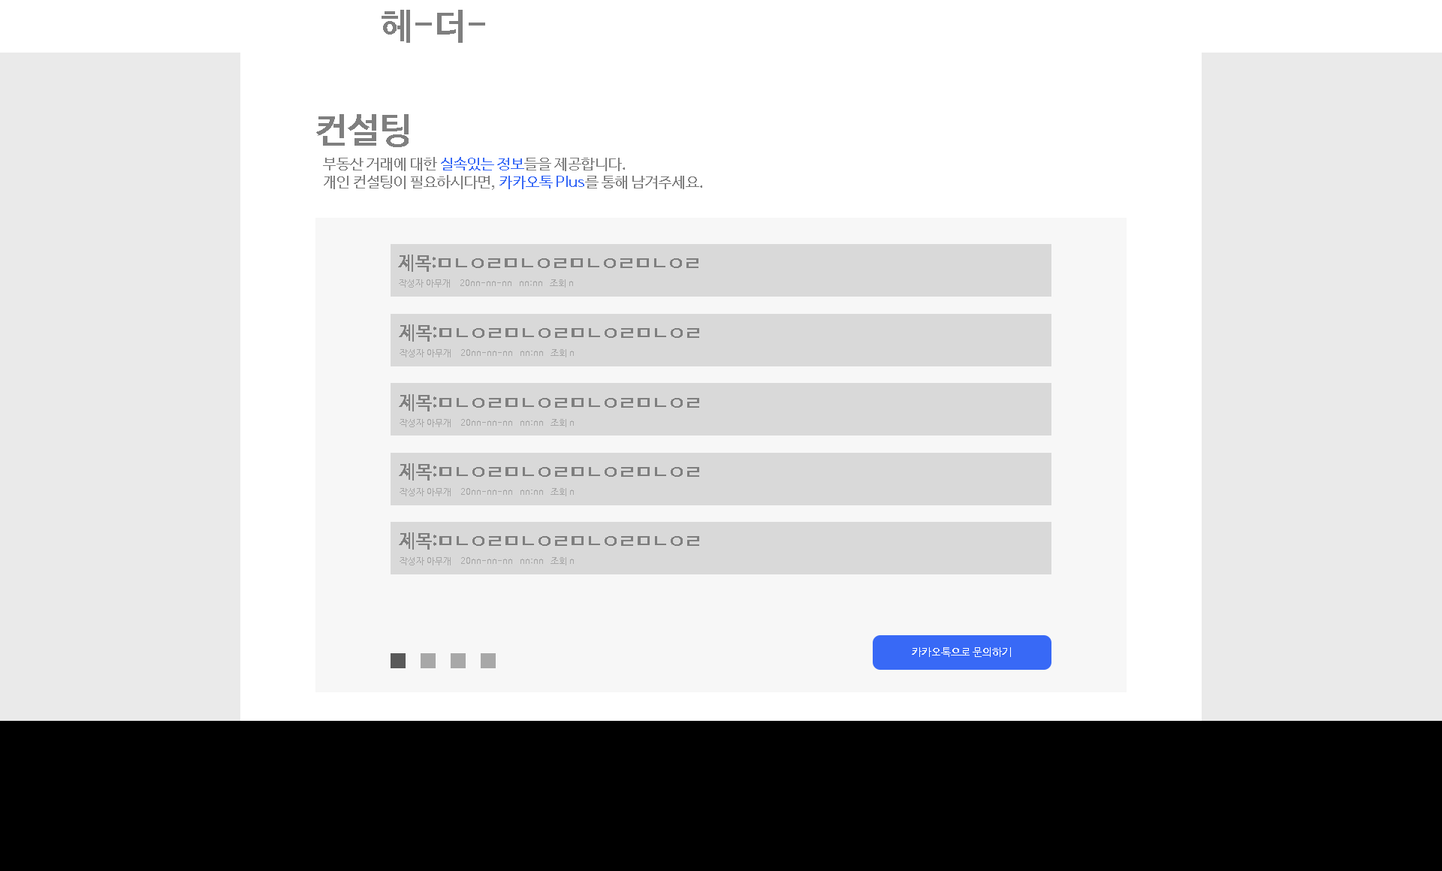
<style>
.page{position:relative;width:1442px;height:871px;background:#eaeaea}
.page>*{position:absolute;margin:0}
.t1{font:36px "NanumBarunGothicBold";color:#7f7f7f}
.t2{font:15px "NanumBarunGothic";color:#7f7f7f}
.t3{font:15px "NanumBarunGothic";color:#3869f6}
.t4{font:18.8px "NanumBarunGothicBold";color:#7f7f7f}
.t5{font:9px "NanumBarunGothic";color:#a7a7a7}
.t6{font:11.3px "NanumBarunGothicBold";color:#ffffff}
</style>
<div class="page">
<p class="t1" style="left:381px;top:10px;width:104px;height:33px">헤-더-</p>
<p class="t1" style="left:316px;top:114px;width:92px;height:33px">컨설팅</p>
<p class="t2" style="left:323px;top:157px;width:302px;height:14px">부동산 거래에 대한 <span class="t3">실속있는 정보</span>들을 제공합니다.</p>
<p class="t2" style="left:324px;top:175px;width:378px;height:15px">개인 컨설팅이 필요하시다면, <span class="t3">카카오톡 Plus</span>를 통해 남겨주세요.</p>
<p class="t4" style="left:398px;top:255px;width:300px;height:17px">제목:ㅁㄴㅇㄹㅁㄴㅇㄹㅁㄴㅇㄹㅁㄴㅇㄹ</p>
<p class="t5" style="left:399px;top:279px;width:51px;height:9px">작성자 아무개</p>
<p class="t5" style="left:460px;top:279px;width:51px;height:7px">20nn-nn-nn</p>
<p class="t5" style="left:520px;top:281px;width:22px;height:5px">nn:nn</p>
<p class="t5" style="left:550px;top:279px;width:23px;height:9px">조회 n</p>
<p class="t4" style="left:399px;top:324px;width:300px;height:18px">제목:ㅁㄴㅇㄹㅁㄴㅇㄹㅁㄴㅇㄹㅁㄴㅇㄹ</p>
<p class="t5" style="left:399px;top:349px;width:52px;height:8px">작성자 아무개</p>
<p class="t5" style="left:461px;top:349px;width:51px;height:7px">20nn-nn-nn</p>
<p class="t5" style="left:520px;top:351px;width:23px;height:5px">nn:nn</p>
<p class="t5" style="left:550px;top:349px;width:24px;height:8px">조회 n</p>
<p class="t4" style="left:399px;top:394px;width:300px;height:17px">제목:ㅁㄴㅇㄹㅁㄴㅇㄹㅁㄴㅇㄹㅁㄴㅇㄹ</p>
<p class="t5" style="left:399px;top:419px;width:52px;height:8px">작성자 아무개</p>
<p class="t5" style="left:461px;top:419px;width:51px;height:7px">20nn-nn-nn</p>
<p class="t5" style="left:520px;top:420px;width:23px;height:6px">nn:nn</p>
<p class="t5" style="left:550px;top:419px;width:24px;height:8px">조회 n</p>
<p class="t4" style="left:399px;top:463px;width:300px;height:18px">제목:ㅁㄴㅇㄹㅁㄴㅇㄹㅁㄴㅇㄹㅁㄴㅇㄹ</p>
<p class="t5" style="left:399px;top:488px;width:52px;height:8px">작성자 아무개</p>
<p class="t5" style="left:461px;top:488px;width:51px;height:7px">20nn-nn-nn</p>
<p class="t5" style="left:520px;top:490px;width:23px;height:5px">nn:nn</p>
<p class="t5" style="left:550px;top:488px;width:24px;height:8px">조회 n</p>
<p class="t4" style="left:399px;top:532px;width:300px;height:18px">제목:ㅁㄴㅇㄹㅁㄴㅇㄹㅁㄴㅇㄹㅁㄴㅇㄹ</p>
<p class="t5" style="left:399px;top:557px;width:52px;height:8px">작성자 아무개</p>
<p class="t5" style="left:461px;top:557px;width:51px;height:7px">20nn-nn-nn</p>
<p class="t5" style="left:550px;top:557px;width:24px;height:8px">조회 n</p>
<p class="t5" style="left:520px;top:559px;width:23px;height:5px">nn:nn</p>
<p class="t6" style="left:912px;top:647px;width:99px;height:10px">카카오톡으로 문의하기</p>
</div>
